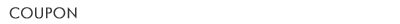
<style>
.page{position:relative;width:400px;height:24px;background:#ffffff}
.page>*{position:absolute;margin:0}
.t1{font:14.7px "FuturaBT-Light";letter-spacing:0.025em;color:#363636;text-transform:uppercase;font-weight:bold}
</style>
<div class="page">
<p class="t1" style="left:9px;top:7px;width:68px;height:12px">coupon</p>
</div>
